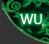
<style>
.page{position:relative;width:49px;height:44px;background:#333333}
.page>*{position:absolute;margin:0}
.t1{font:14px "LaoUI";color:#ffffff}
</style>
<div class="page">
<p class="t1" style="left:20px;top:14px;width:22px;height:10px">WU</p>
</div>
